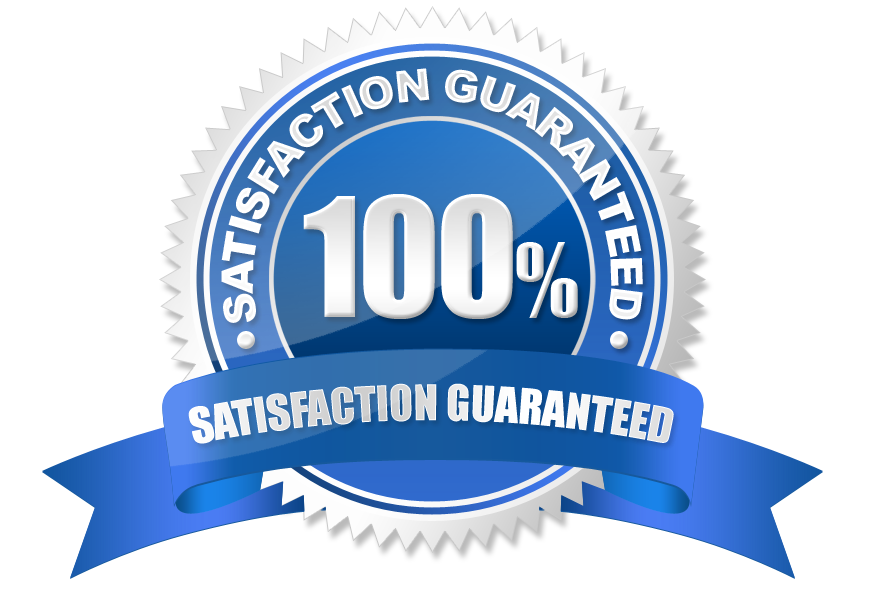
<style>
.page{position:relative;width:889px;height:600px;background:#ffffff}
.page>*{position:absolute;margin:0}
.t1{font:44px/25px "Arial-Black";letter-spacing:-0.07em;color:#ffffff;text-transform:uppercase}
.t2{font:153.3px "Impact";letter-spacing:-0.025em;color:#ffffff}
.t3{font:93px "Impact";letter-spacing:-0.025em;color:#ffffff}
.t4{font:44.8px "Impact";letter-spacing:-0.01em;color:#ffffff;text-transform:uppercase}
</style>
<div class="page">
<p class="t1" style="left:221px;top:68px;width:422px;height:255px">Satisfaction Guaranteed</p>
<p class="t2" style="left:303px;top:194px;width:275px;height:125px">100<span class="t3">%</span></p>
<p class="t4" style="left:188px;top:383px;width:486px;height:61px">Satisfaction Guaranteed</p>
</div>
